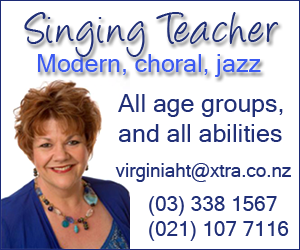
<style>
.page{position:relative;width:300px;height:250px;background:#ffffff}
.page>*{position:absolute;margin:0}
.t1{font:50px "Angelina";color:#202f77}
.t2{font:25px "MicrosoftSansSerif";color:#3b5af2}
.t3{font:25px "MicrosoftSansSerif";color:#202f77}
.t4{font:18.8px "MicrosoftSansSerif";color:#202f77}
.t5{font:20.8px "MicrosoftSansSerif";color:#202f77}
</style>
<div class="page">
<p class="t1" style="left:24px;top:12px;width:255px;height:45px">Singing Teacher</p>
<p class="t2" style="left:38px;top:54px;width:223px;height:23px">Modern, choral, jazz</p>
<p class="t3" style="left:118px;top:94px;width:165px;height:48px">All age groups, <br>and all abilities</p>
<p class="t4" style="left:115px;top:163px;width:176px;height:19px">virginiaht@xtra.co.nz</p>
<p class="t5" style="left:149px;top:196px;width:140px;height:45px">(03) 338 1567<br>(021) 107 7116</p>
</div>
